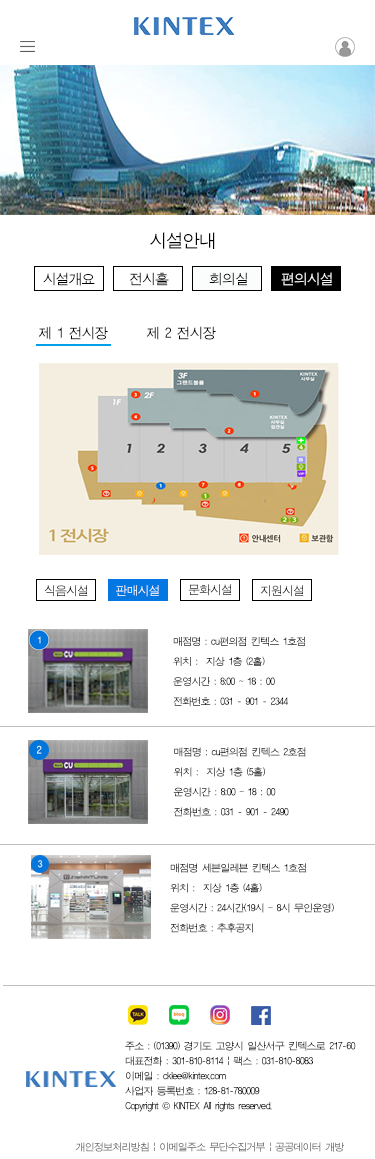
<style>
.page{position:relative;width:375px;height:1159px;background:#ffffff}
.page>*{position:absolute;margin:0}
.t1{font:18px "ÈÞ¸Õ°íµñ";letter-spacing:-0.08em;color:#010101}
.t2{font:14px "ÈÞ¸Õ°íµñ";letter-spacing:-0.08em;color:#000000}
.t3{font:14px "ÈÞ¸Õ°íµñ";letter-spacing:-0.08em;color:#010101}
.t4{font:14px "ÈÞ¸Õ°íµñ";letter-spacing:-0.08em;color:#fdfcfc}
.t5{font:12px "ÈÞ¸Õ°íµñ";letter-spacing:-0.08em;color:#000000}
.t6{font:12px "ÈÞ¸Õ°íµñ";letter-spacing:-0.08em;color:#ffffff}
.t7{font:12px "ÈÞ¸Õ°íµñ";letter-spacing:-0.08em;color:#070707}
.t8{font:10px/20px "ÈÞ¸Õ°íµñ";letter-spacing:-0.08em;color:#010101}
.t9{font:10px/15px "ÈÞ¸Õ°íµñ";letter-spacing:-0.08em;color:#020202}
.t10{font:10px/15px "Gulim";letter-spacing:-0.08em;color:#020202}
.t11{font:10px "ÈÞ¸Õ°íµñ";letter-spacing:-0.08em}
</style>
<div class="page">
<p class="t1" style="left:150px;top:232px;width:65px;height:17px">시설안내</p>
<p class="t2" style="left:43px;top:272px;width:52px;height:14px">시설개요</p>
<p class="t3" style="left:129px;top:272px;width:40px;height:14px">전시홀</p>
<p class="t2" style="left:209px;top:272px;width:38px;height:14px">회의실</p>
<p class="t4" style="left:281px;top:272px;width:51px;height:14px">편의시설</p>
<p class="t2" style="left:38px;top:326px;width:178px;height:14px">제 1 전시장   제 2 전시장</p>
<p class="t5" style="left:44px;top:585px;width:44px;height:12px">식음시설</p>
<p class="t6" style="left:116px;top:585px;width:43px;height:12px">판매시설</p>
<p class="t7" style="left:188px;top:584px;width:44px;height:12px">문화시설</p>
<p class="t7" style="left:260px;top:585px;width:44px;height:12px">지원시설</p>
<p class="t8" style="left:173px;top:636px;width:132px;height:71px">매점명 : cu편의점 킨텍스 1호점<br>위치 :  지상 1층 (2홀)<br>운영시간 : 8:00 ~ 18 : 00<br>전화번호 : 031 - 901 - 2344</p>
<p class="t8" style="left:173px;top:747px;width:133px;height:70px">매점명 : cu편의점 킨텍스 2호점<br>위치 :  지상 1층 (5홀)<br>운영시간 : 8:00 ~ 18 : 00<br>전화번호 : 031 - 901 - 2490</p>
<p class="t8" style="left:170px;top:863px;width:164px;height:70px">매점명 세븐일레븐 킨텍스 1호점<br>위치 :  지상 1층 (4홀)<br>운영시간 : 24시간(19시 ~ 8시 무인운영)<br>전화번호 : 추후공지</p>
<p class="t9" style="left:125px;top:1041px;width:231px;height:71px">주소 : (01390) 경기도 고양시 일산서구 킨텍스로 217-60<br>대표전화 : 301-810-8114 | 팩스 : 031-810-8083<br>이메일 : cklee@kintex.com <br>사업자 등록번호 : 128-81-780009<br>Copyright <span class="t10">©</span> KINTEX All rights reserved.</p>
<p class="t11" style="left:75px;top:1142px;width:269px;height:10px">개인정보처리방침 | 이메일주소 무단수집거부 | 공공데이터 개방</p>
</div>
